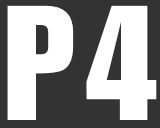
<style>
.page{position:relative;width:160px;height:128px;background:#ffffff}
.page>*{position:absolute;margin:0}
.t1{font:160px "GENUINE";letter-spacing:0.05em;color:#ffffff}
</style>
<div class="page">
<p class="t1" style="left:7px;top:5px;width:150px;height:115px">P4</p>
</div>
